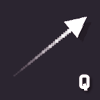
<style>
.page{position:relative;width:100px;height:100px;background:#2b2530}
.page>*{position:absolute;margin:0}
.t1{font:24px "BenderSolid";color:#ffffff}
</style>
<div class="page">
<p class="t1" style="left:79px;top:74px;width:11px;height:17px">q</p>
</div>
